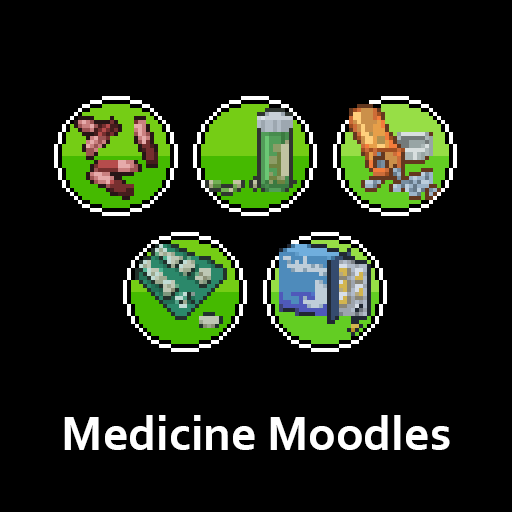
<style>
.page{position:relative;width:512px;height:512px;background:#000000}
.page>*{position:absolute;margin:0}
.t1{font:12px "Corbel-Bold";color:#ffffff}
</style>
<div class="page">
<p class="t1" style="left:64px;top:415px;width:386px;height:35px;text-align:center">Medicine Moodles</p>
</div>
